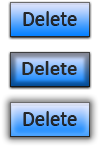
<style>
.page{position:relative;width:100px;height:146px}
.page>*{position:absolute;margin:0}
.t1{font:20.8px "Calibri";color:#282828}
.t2{font:20.8px "Calibri-Bold";color:#282828}
</style>
<div class="page">
<p class="t1" style="left:23px;top:11px;width:54px;height:14px">Delete</p>
<p class="t2" style="left:22px;top:61px;width:55px;height:14px">Delete</p>
<p class="t1" style="left:23px;top:111px;width:54px;height:14px">Delete</p>
</div>
